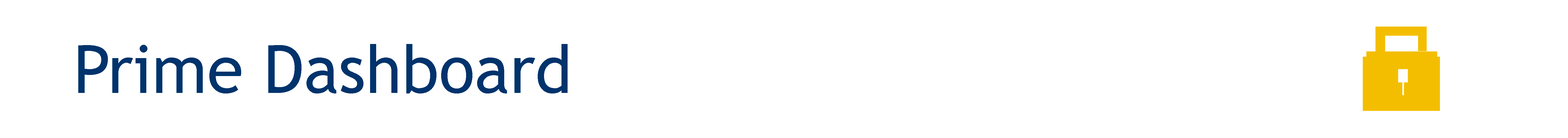
<style>
.page{position:relative;width:1568px;height:138px;background:#ffffff}
.page>*{position:absolute;margin:0}
.t1{font:66.4px "TrebuchetMS";color:#00336c}
</style>
<div class="page">
<p class="t1" style="left:78px;top:44px;width:490px;height:49px">Prime Dashboard</p>
</div>
